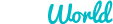
<style>
.page{position:relative;width:113px;height:24px;background:#ffffff}
.page>*{position:absolute;margin:0}
.t1{font:24px "Pacifico";color:#00bac6}
.t2{font:24px "Pacifico";color:#ffffff}
</style>
<div class="page">
<p class="t1" style="left:0px;top:0px;width:113px;height:25px"><span class="t2">Web</span>World</p>
</div>
